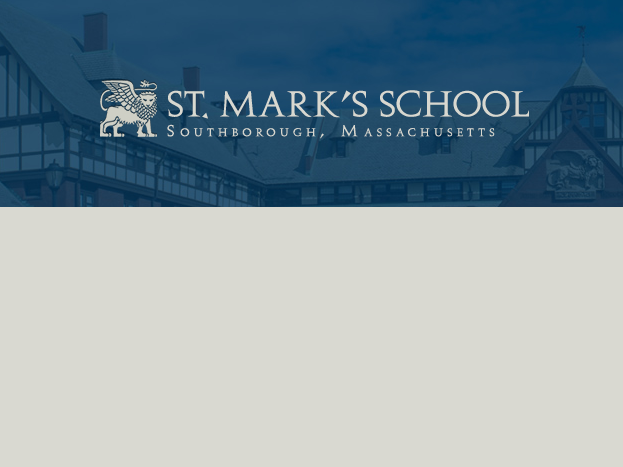
<style>
.page{position:relative;width:623px;height:467px;background:#d9d9d1}
.page>*{position:absolute;margin:0}
.t1{font:14.9px/19.8px "AureaTitling";letter-spacing:0.4em;color:#d8d8d0;font-variant:small-caps}
.t2{font:33.7px "AureaTitling";color:#d8d8d0}
</style>
<div class="page">
<p class="t1" style="left:167px;top:90px;width:362px;height:49px"><span class="t2">ST. MARK’S SCHOOL<br></span>Southborough, Massachusetts</p>
</div>
